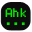
<style>
.page{position:relative;width:32px;height:32px;background:#0c0c0c}
.page>*{position:absolute;margin:0}
.t1{font:10px "Terminal";color:#08e600}
</style>
<div class="page">
<p class="t1" style="left:5px;top:8px;width:21px;height:9px">Ahk</p>
<p class="t1" style="left:6px;top:22px;width:19px;height:3px">...</p>
</div>
